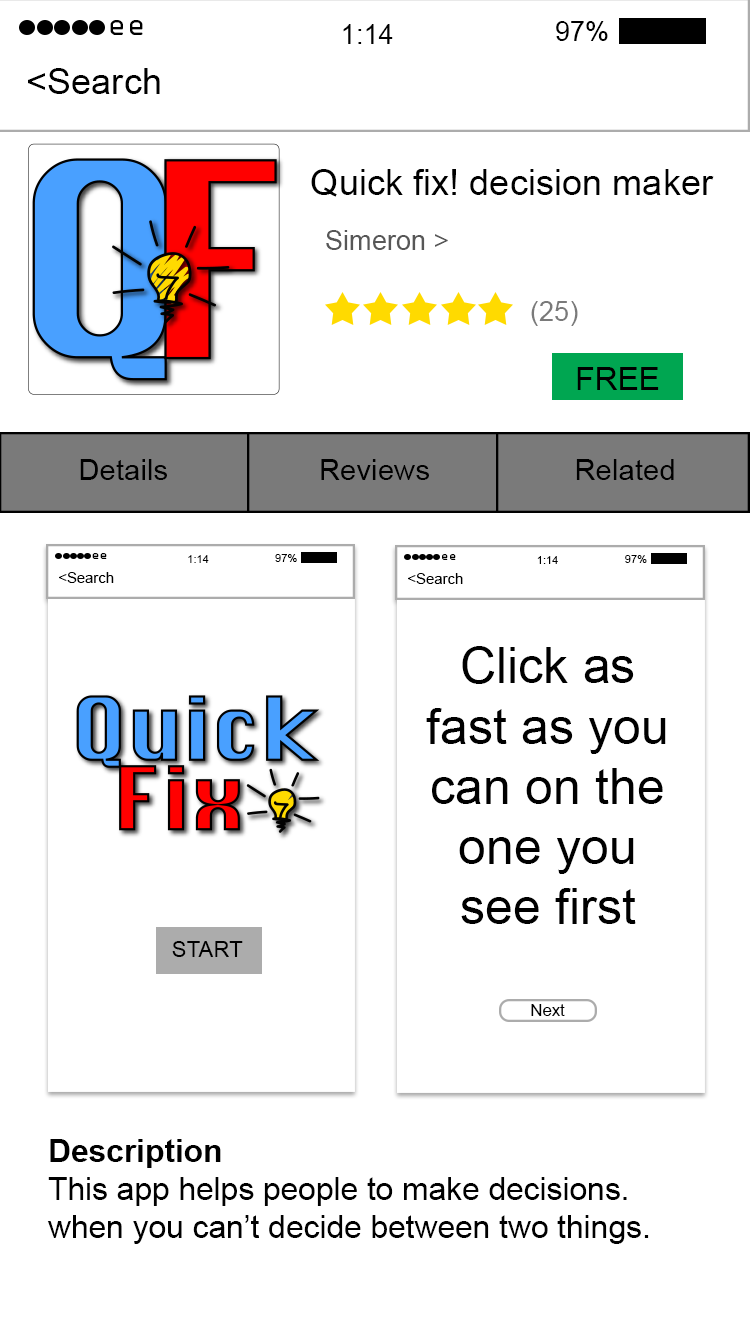
<style>
.page{position:relative;width:750px;height:1334px;background:#ffffff}
.page>*{position:absolute;margin:0}
.t1{font:27.2px "OCRAStd";color:#000000}
.t2{font:27.2px "ArialMT";color:#000000}
.t3{font:36.2px "ArialMT";color:#000000}
.t4{font:27.2px "ArialMT";color:#575757}
.t5{font:27.2px "ArialMT";color:#7a7a7a}
.t6{font:31.7px "ArialMT";color:#000000}
.t7{font:29.4px "ArialMT";color:#000000}
.t8{font:11.1px "OCRAStd";color:#000000}
.t9{font:11.1px "ArialMT";color:#000000}
.t10{font:14.9px "ArialMT";color:#000000}
.t11{font:50.1px "ArialMT";color:#000000}
.t12{font:22.3px "ArialMT";color:#000000}
.t13{font:16.7px "ArialMT";color:#000000}
.t14{font:31.7px "Arial-BoldMT";color:#000000}
</style>
<div class="page">
<p class="t1" style="left:110px;top:20px;width:33px;height:15px">ee</p>
<p class="t2" style="left:343px;top:24px;width:50px;height:20px">1:14</p>
<p class="t2" style="left:556px;top:21px;width:52px;height:20px">97%</p>
<p class="t3" style="left:28px;top:68px;width:132px;height:26px">&lt;Search</p>
<p class="t3" style="left:311px;top:169px;width:403px;height:28px">Quick fix! decision maker</p>
<p class="t4" style="left:326px;top:230px;width:122px;height:20px">Simeron &gt;</p>
<p class="t5" style="left:531px;top:301px;width:47px;height:25px">(25)</p>
<p class="t6" style="left:577px;top:367px;width:82px;height:23px">FREE</p>
<p class="t7" style="left:80px;top:459px;width:87px;height:21px">Details</p>
<p class="t7" style="left:321px;top:459px;width:108px;height:21px">Reviews</p>
<p class="t7" style="left:576px;top:459px;width:98px;height:21px">Related</p>
<p class="t8" style="left:92px;top:553px;width:15px;height:6px">ee</p>
<p class="t9" style="left:188px;top:555px;width:21px;height:8px">1:14</p>
<p class="t9" style="left:275px;top:554px;width:22px;height:8px">97%</p>
<p class="t8" style="left:442px;top:554px;width:14px;height:6px">ee</p>
<p class="t9" style="left:537px;top:556px;width:21px;height:8px">1:14</p>
<p class="t9" style="left:625px;top:555px;width:22px;height:8px">97%</p>
<p class="t10" style="left:59px;top:572px;width:55px;height:11px">&lt;Search</p>
<p class="t10" style="left:408px;top:573px;width:55px;height:11px">&lt;Search</p>
<p class="t11" style="left:426px;top:646px;width:240px;height:278px;text-align:center">Click as fast as you can on the one you see first</p>
<p class="t12" style="left:172px;top:941px;width:71px;height:16px">START</p>
<p class="t13" style="left:531px;top:1004px;width:34px;height:12px">Next</p>
<p class="t6" style="left:47px;top:1139px;width:602px;height:105px"><span class="t14">Description<br></span>This app helps people to make decisions. when you can’t decide between two things.</p>
</div>
